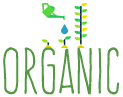
<style>
.page{position:relative;width:123px;height:97px;background:#ffffff}
.page>*{position:absolute;margin:0}
.t1{font:57px "FrenteH1-Regular";color:#549843}
</style>
<div class="page">
<p class="t1" style="left:3px;top:47px;width:117px;height:48px">ORGANIC</p>
</div>
